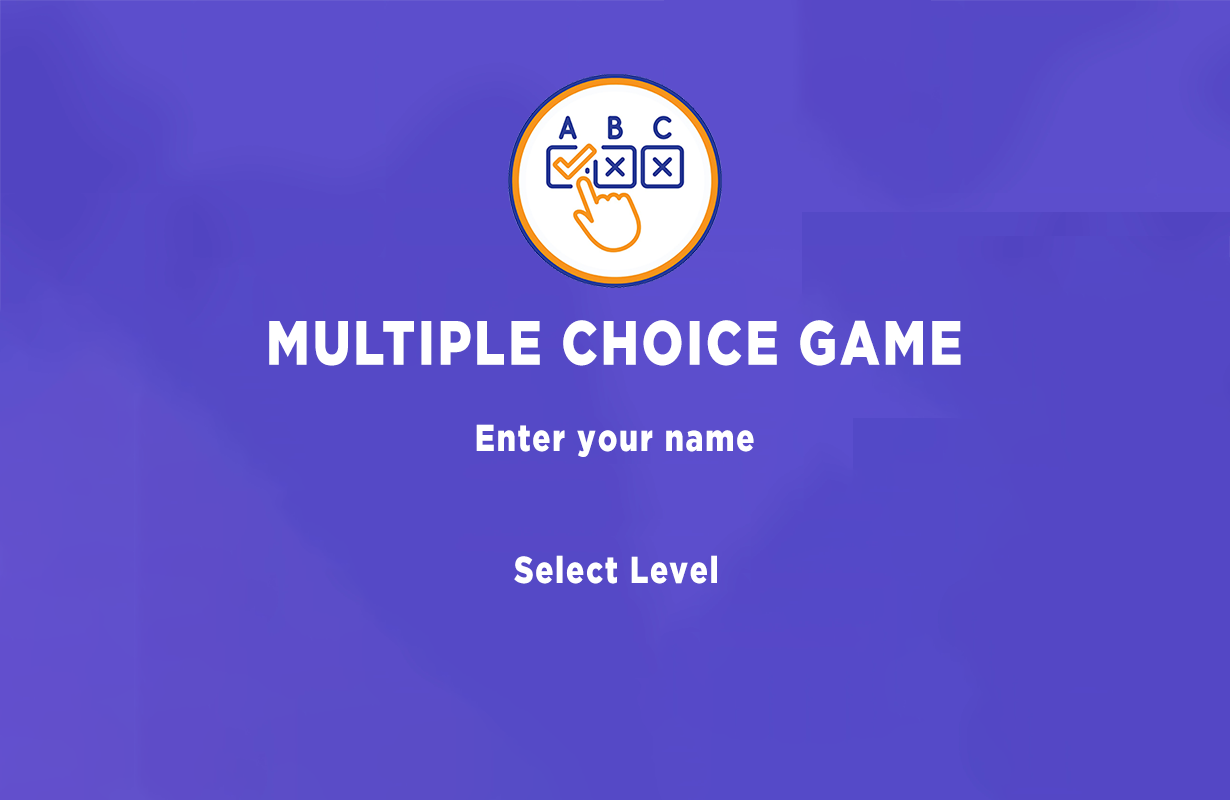
<style>
.page{position:relative;width:1230px;height:800px}
.page>*{position:absolute;margin:0}
.t1{font:62.5px "SVN-GothamBlack";letter-spacing:0.06em;color:#ffffff;scale:0.8 1}
.t2{font:37.5px "SVN-GothamBlack";letter-spacing:0.06em;color:#ffffff;scale:0.8 1}
</style>
<div class="page">
<p class="t1" style="left:269px;top:320px;width:692px;height:46px">MULTIPLE CHOICE GAME</p>
<p class="t2" style="left:476px;top:424px;width:278px;height:33px">Enter your name</p>
<p class="t2" style="left:514px;top:555px;width:203px;height:29px">Select Level</p>
</div>
